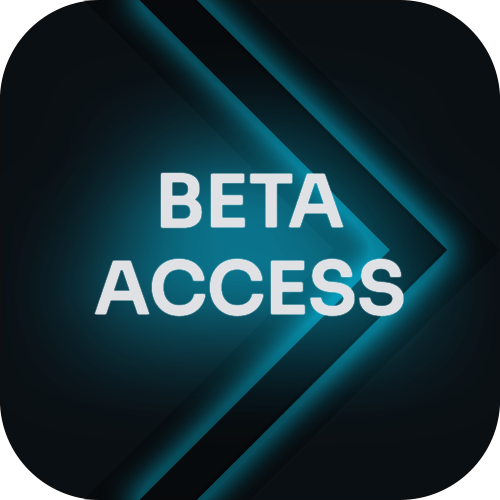
<style>
.page{position:relative;width:500px;height:500px}
.page>*{position:absolute;margin:0}
.t1{font:72.8px "Sora-SemiBold";color:#dfe1e4}
</style>
<div class="page">
<p class="t1" style="left:95px;top:173px;width:308px;height:143px;text-align:center">BETA<br>ACCESS</p>
</div>
